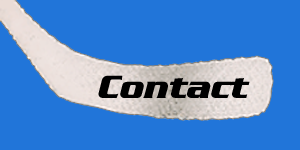
<style>
.page{position:relative;width:300px;height:150px;background:#2175d9}
.page>*{position:absolute;margin:0}
.t1{font:33.3px "SerpentineD-BoldItal";color:#000000}
</style>
<div class="page">
<p class="t1" style="left:98px;top:75px;width:152px;height:23px">Contact</p>
</div>
